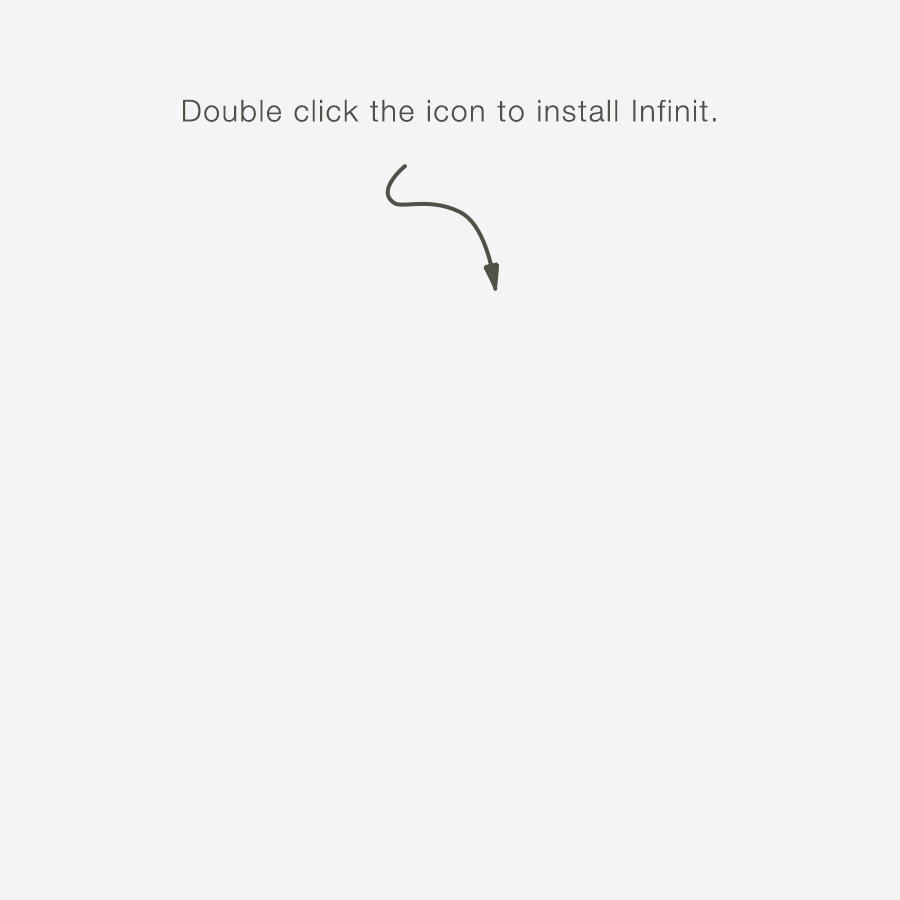
<style>
.page{position:relative;width:900px;height:900px;background:#f4f4f4}
.page>*{position:absolute;margin:0}
.t1{font:30px "HelveticaNeue-Light";letter-spacing:0.06em;color:#515149}
</style>
<div class="page">
<p class="t1" style="left:183px;top:99px;width:533px;height:23px">Double click the icon to install Infinit.</p>
</div>
